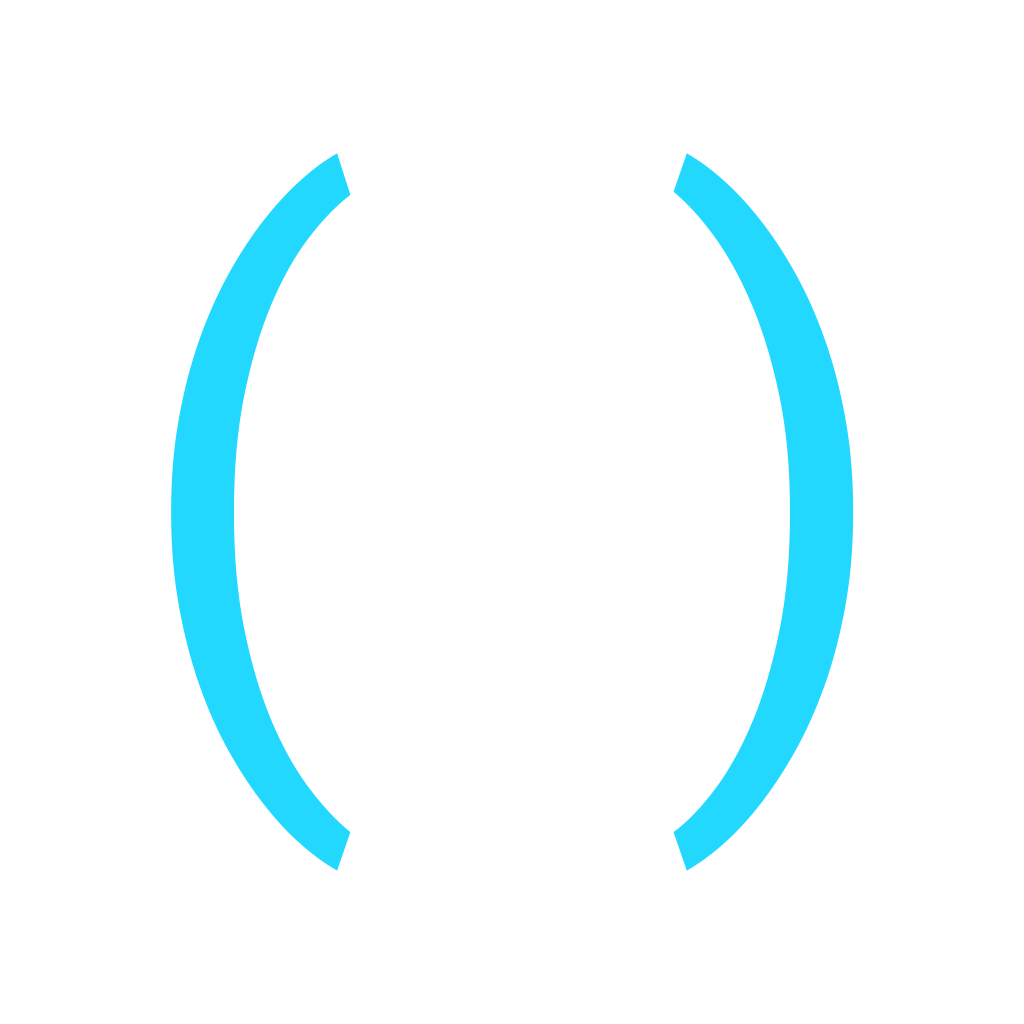
<style>
.page{position:relative;width:1024px;height:1024px;background:#ffffff}
.page>*{position:absolute;margin:0}
.t1{font:695px "RobotoMono-Regular";letter-spacing:0.14em;color:#22d8ff}
</style>
<div class="page">
<p class="t1" style="left:171px;top:153px;width:683px;height:718px">()</p>
</div>
